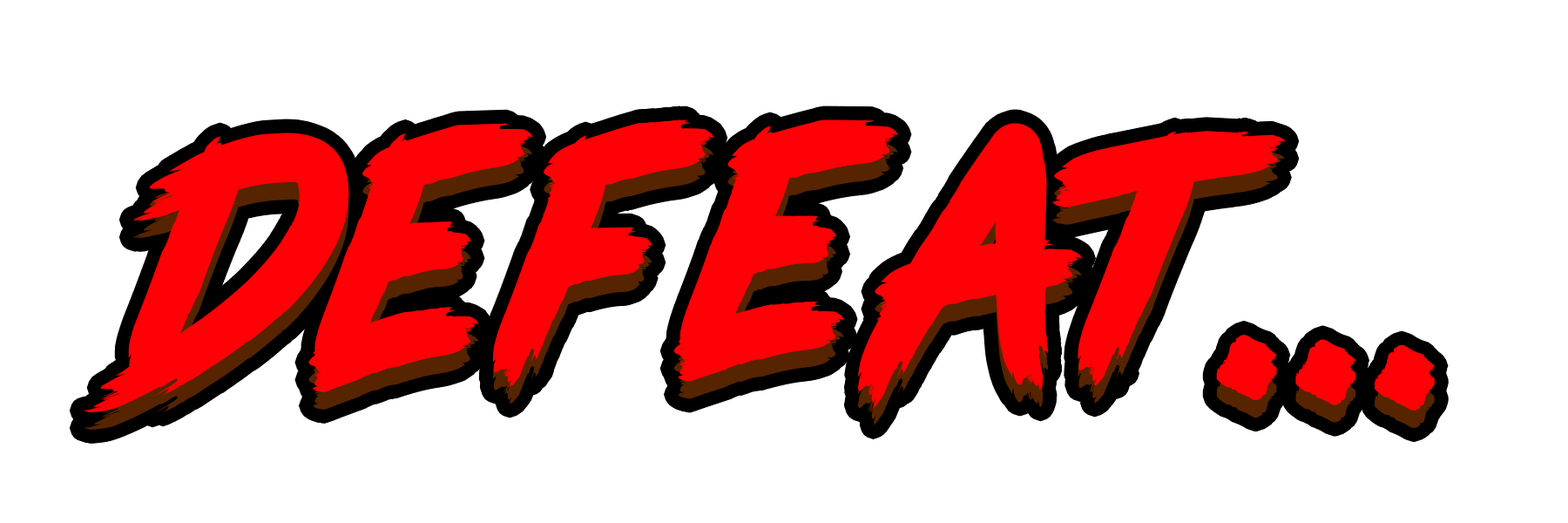
<style>
.page{position:relative;width:1568px;height:523px;background:#ffffff}
.page>*{position:absolute;margin:0}
.t1{font:397.5px "PinkBlue";color:#ff0006}
</style>
<div class="page">
<p class="t1" style="left:83px;top:119px;width:1352px;height:293px">DEFEAT...</p>
</div>
